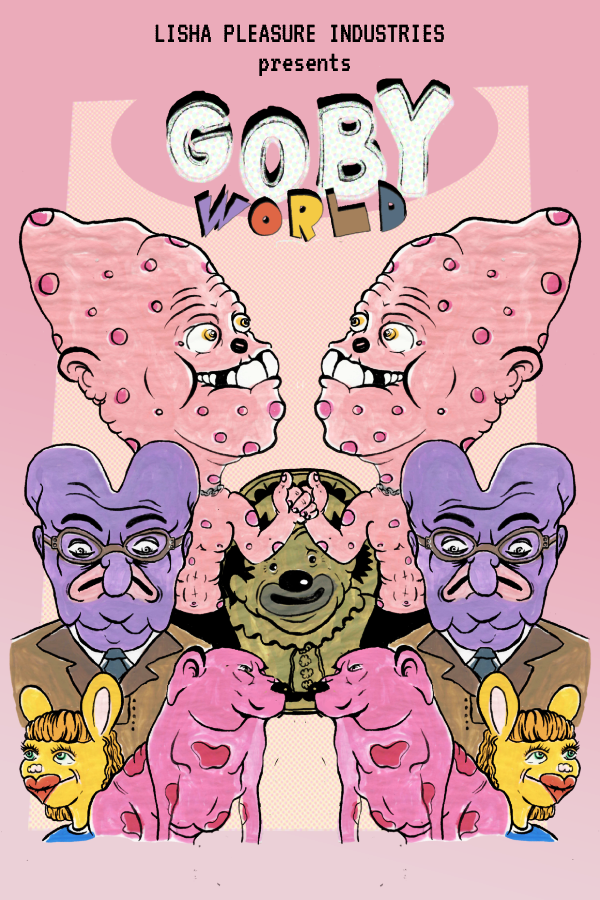
<style>
.page{position:relative;width:600px;height:900px}
.page>*{position:absolute;margin:0}
.t1{font:30.9px/29.9px "VT323-Regular";color:#000000;scale:0.94 1}
</style>
<div class="page">
<p class="t1" style="left:155px;top:24px;width:289px;height:52px;text-align:center">LISHA PLEASURE INDUSTRIES <br>presents</p>
</div>
